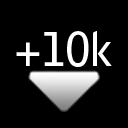
<style>
.page{position:relative;width:128px;height:128px;background:#000000}
.page>*{position:absolute;margin:0}
.t1{font:46.1px "BellGothicStd-Bold";letter-spacing:-0.02em;color:#ffffff}
</style>
<div class="page">
<p class="t1" style="left:16px;top:31px;width:96px;height:36px">+10k</p>
</div>
